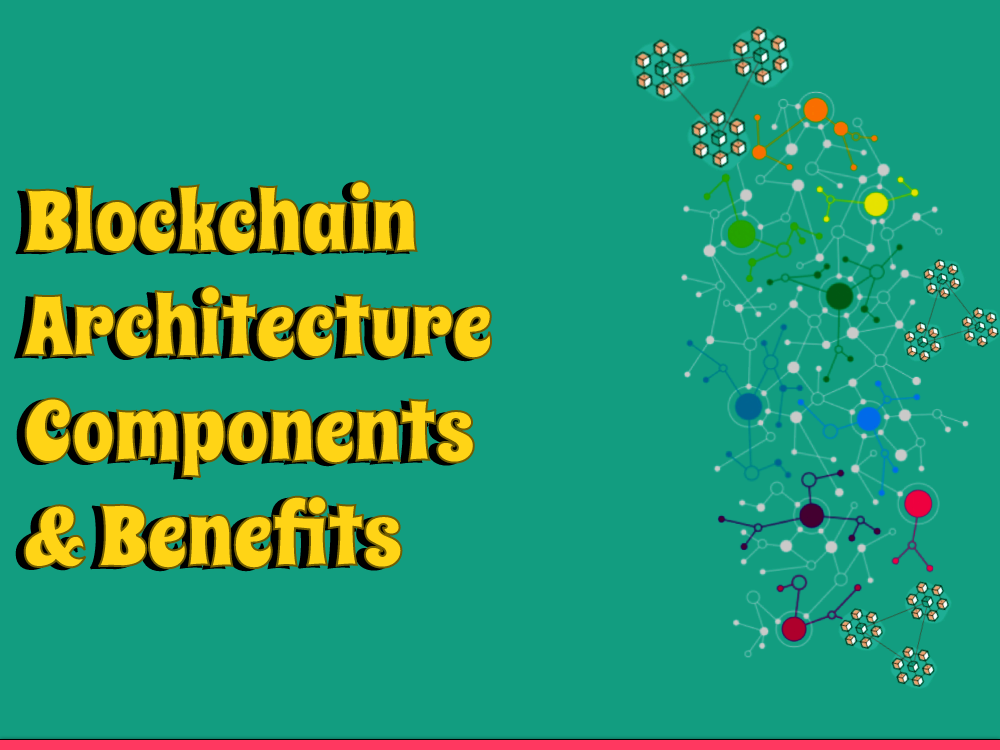
<style>
.page{position:relative;width:1000px;height:750px;background:#129d80}
.page>*{position:absolute;margin:0}
.t1{font:85px/105px "SpicyRice-Regular";color:#ffd416}
</style>
<div class="page">
<p class="t1" style="left:22px;top:180px;width:471px;height:390px">Blockchain<br>Architecture<br>Components<br>&amp; Benefits</p>
</div>
